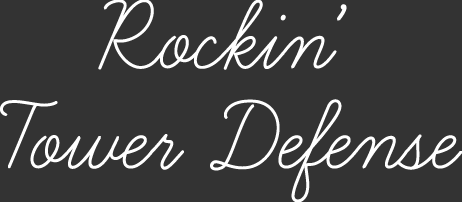
<style>
.page{position:relative;width:462px;height:202px;background:#333333}
.page>*{position:absolute;margin:0}
.t1{font:120px/100px "LearningCurvePro";color:#ffffff}
</style>
<div class="page">
<p class="t1" style="left:0px;top:0px;width:463px;height:203px;text-align:center">Rockin’<br>Tower Defense</p>
</div>
